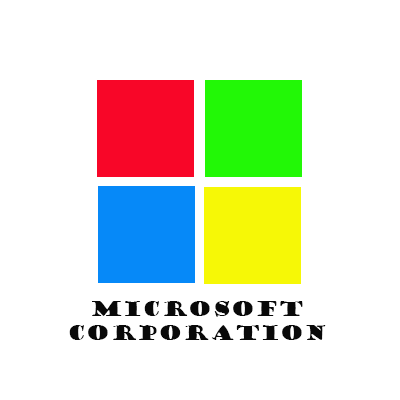
<style>
.page{position:relative;width:400px;height:400px;background:#ffffff}
.page>*{position:absolute;margin:0}
.t1{font:19.4px "GoudyStout";color:#090909}
</style>
<div class="page">
<p class="t1" style="left:69px;top:301px;width:257px;height:39px;text-align:center">Microsoft Corporation</p>
</div>
